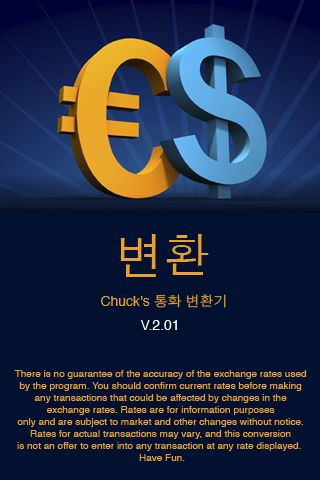
<style>
.page{position:relative;width:320px;height:480px;background:#021130}
.page>*{position:absolute;margin:0}
.t1{font:48px "AppleGothic";color:#e8a12b}
.t2{font:14px "Helvetica";color:#e8a12b}
.t3{font:14px "AppleGothic";color:#e8a12b}
.t4{font:14px "Helvetica";color:#ffffff}
.t5{font:10px "Helvetica";color:#e8a12b}
</style>
<div class="page">
<p class="t1" style="left:120px;top:234px;width:89px;height:43px">변환</p>
<p class="t2" style="left:101px;top:294px;width:125px;height:14px">Chuck's <span class="t3">통화 변환기</span></p>
<p class="t4" style="left:140px;top:320px;width:37px;height:10px">V.2.01</p>
<p class="t5" style="left:14px;top:370px;width:293px;height:91px;text-align:center">There is no guarantee of the accuracy of the exchange rates used <br>by the program. You should confirm current rates before making <br>any transactions that could be affected by changes in the <br>exchange rates. Rates are for information purposes <br>only and are subject to market and other changes without notice. <br>Rates for actual transactions may vary, and this conversion <br>is not an offer to enter into any transaction at any rate displayed.  <br>Have Fun.</p>
</div>
